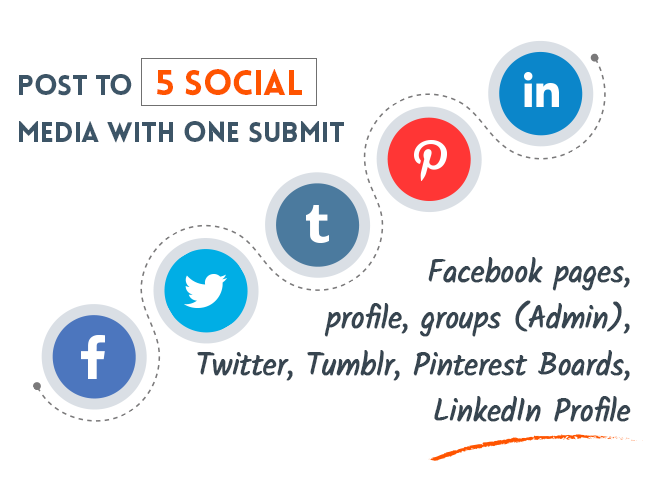
<style>
.page{position:relative;width:650px;height:500px;background:#ffffff}
.page>*{position:absolute;margin:0}
.t1{font:27.8px/47.2px "LoveloBlack";letter-spacing:-0.005em;color:#3d5567}
.t2{font:34.7px/47.2px "LoveloBlack";letter-spacing:-0.005em;color:#ff5400}
.t3{font:30.6px/46.5px "Kalam-Regular";letter-spacing:-0.02em;color:#374550;font-weight:bold}
</style>
<div class="page">
<p class="t1" style="left:19px;top:69px;width:325px;height:74px">Post to   <span class="t2">5 social<br></span>media with one submit</p>
<p class="t3" style="left:197px;top:257px;width:434px;height:165px;text-align:right">Facebook pages,<br>profile, groups (Admin),<br>Twitter, Tumblr, Pinterest Boards,<br>LinkedIn Profile</p>
</div>
